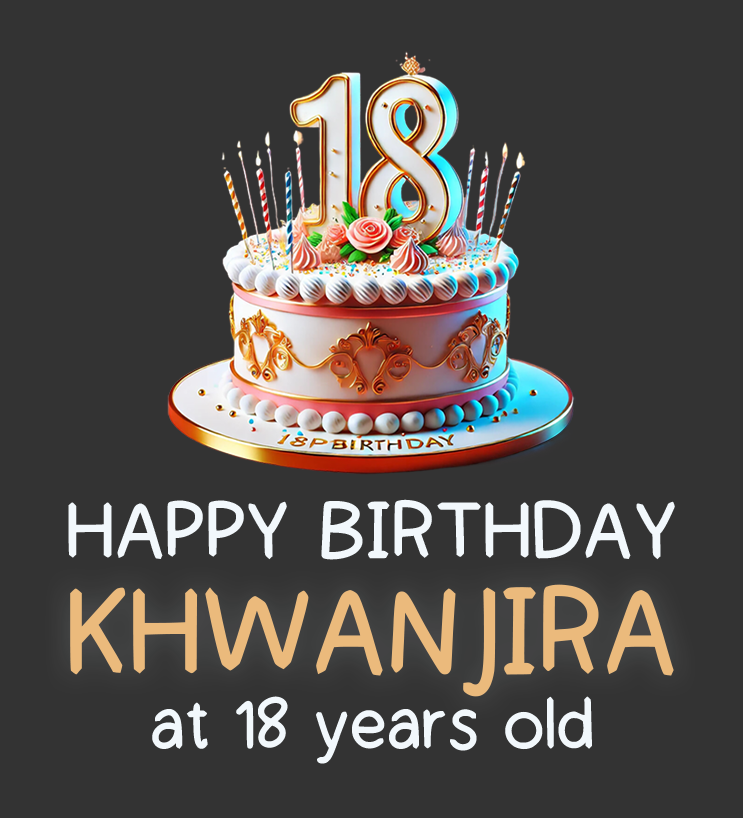
<style>
.page{position:relative;width:743px;height:818px;background:#333333}
.page>*{position:absolute;margin:0}
.t1{font:78.8px "KanyaBold";color:#f2f8fc;scale:1.04 1}
.t2{font:121.1px "KanyaBold";color:#ebba7c}
.t3{font:68.1px "KanyaBold";color:#f2f8fc}
</style>
<div class="page">
<p class="t1" style="left:68px;top:499px;width:607px;height:61px">HAPPY BIRTHDAY</p>
<p class="t2" style="left:70px;top:584px;width:604px;height:113px">KHWANJIRA</p>
<p class="t3" style="left:152px;top:696px;width:440px;height:68px">at 18 years old</p>
</div>
